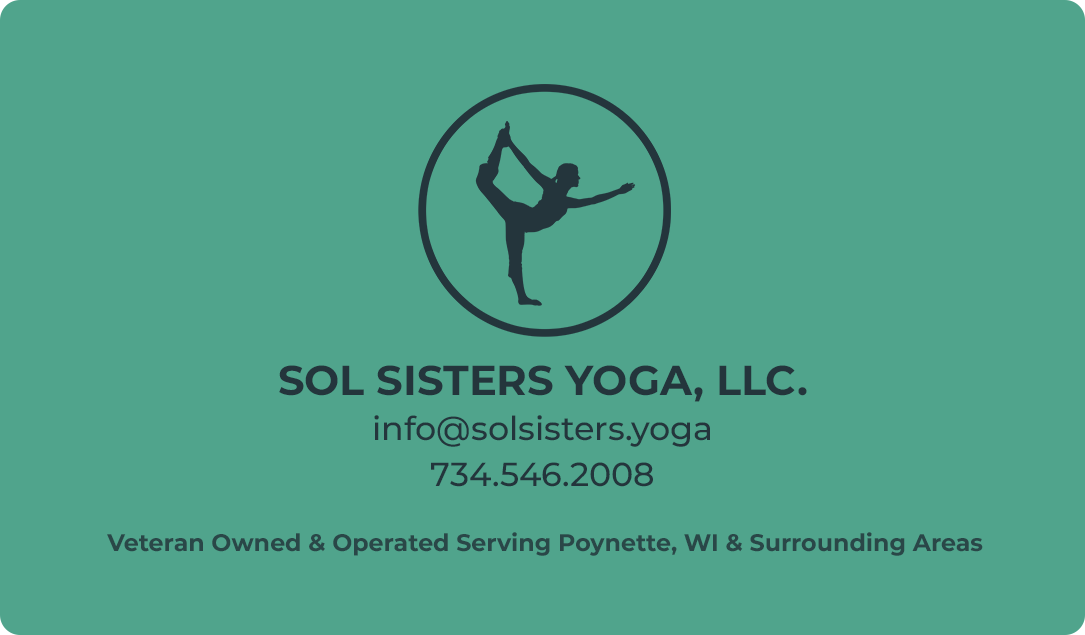
<style>
.page{position:relative;width:1085px;height:635px;background:#50a48c}
.page>*{position:absolute;margin:0}
.t1{font:33.3px/45.8px "Montserrat-Medium";color:#24353c}
.t2{font:41.7px/58.3px "Montserrat-Bold";color:#24353c;text-transform:uppercase}
.t3{font:23.7px "Montserrat-Bold";color:#24353c}
</style>
<div class="page">
<p class="t1" style="left:279px;top:365px;width:528px;height:122px;text-align:center"><span class="t2">SOL SISTERs YOGA, LLC.<br></span>info@solsisters.yoga<br>734.546.2008</p>
<p class="t3" style="left:107px;top:532px;width:876px;height:24px;opacity:0.88">Veteran Owned &amp; Operated Serving Poynette, WI &amp; Surrounding Areas</p>
</div>
